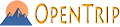
<style>
.page{position:relative;width:120px;height:27px;background:#ffffff}
.page>*{position:absolute;margin:0}
.t1{font:27.2px "LithosPro-Regular";scale:0.65 1}
</style>
<div class="page">
<p class="t1" style="left:34px;top:3px;width:86px;height:21px">OpenTrip</p>
</div>
